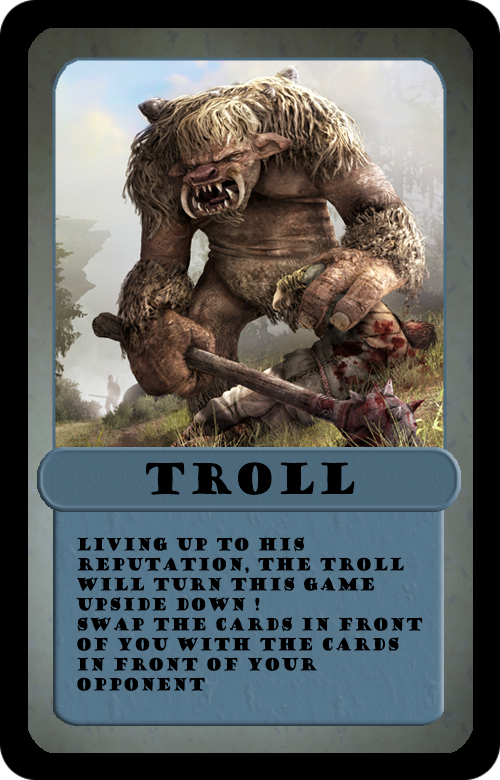
<style>
.page{position:relative;width:500px;height:780px}
.page>*{position:absolute;margin:0}
.t1{font:41.7px "GoudyStout";letter-spacing:0.03em;color:#000000;scale:0.8 1}
.t2{font:16.7px "GoudyStout";letter-spacing:0.03em;color:#000000;scale:0.8 1}
</style>
<div class="page">
<p class="t1" style="left:146px;top:462px;width:209px;height:33px">TROLL</p>
<p class="t2" style="left:76px;top:537px;width:347px;height:154px">Living up to his reputation, the troll will turn this game upside down ! <br>swap the cards in front of you with the cards in front of your opponent</p>
</div>
